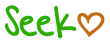
<style>
.page{position:relative;width:110px;height:44px;background:#ffffff}
.page>*{position:absolute;margin:0}
.t1{font:36px "BeautifulEveryTime";color:#29ad00;font-weight:bold}
.t2{font:36px "BeautifulEveryTime";color:#c26a14;font-weight:bold}
</style>
<div class="page">
<p class="t1" style="left:5px;top:5px;width:72px;height:34px">Seek</p>
<p class="t2" style="left:77px;top:12px;width:28px;height:25px">|</p>
</div>
